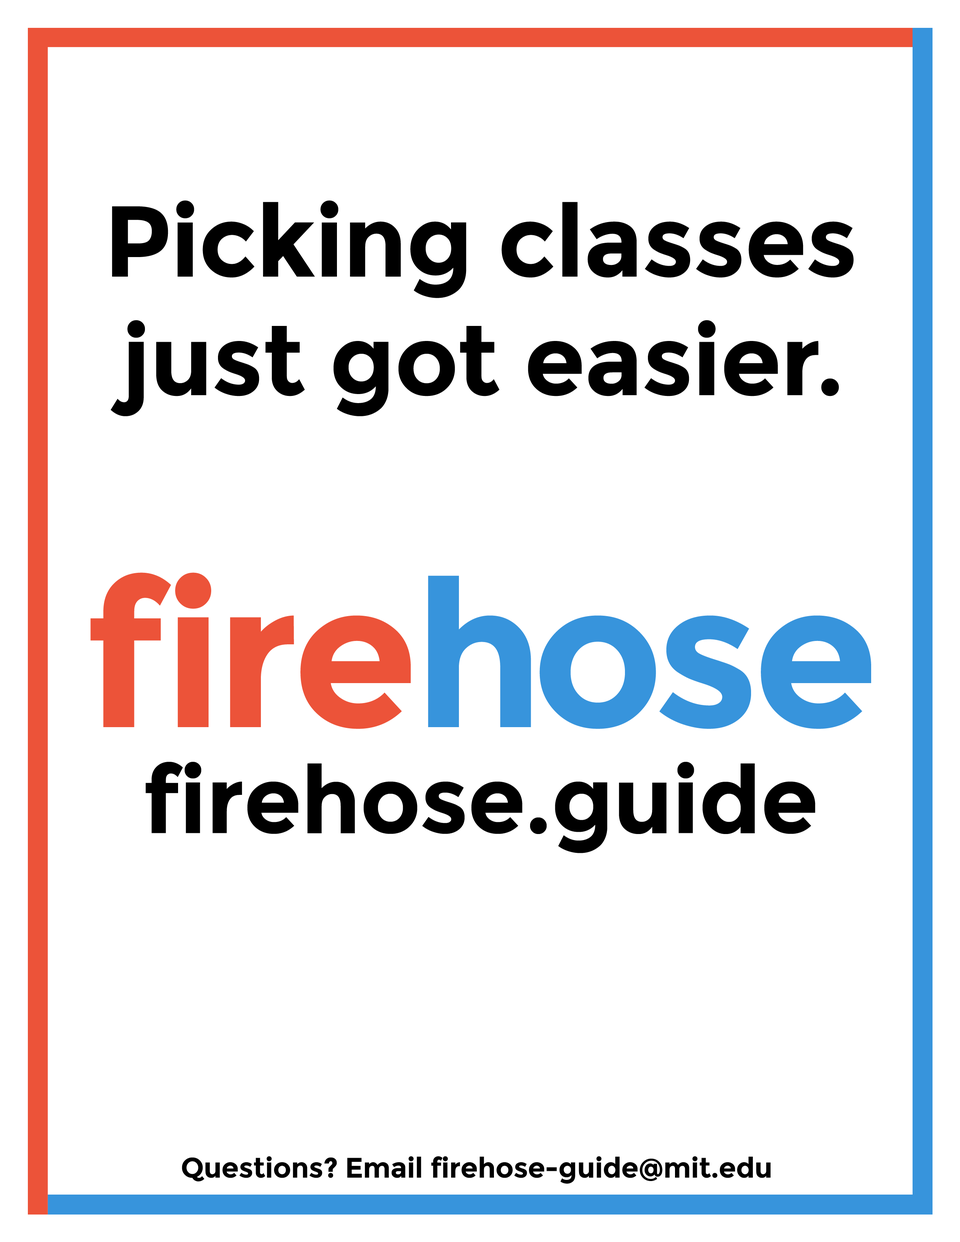
<style>
.page{position:relative;width:960px;height:1242px;background:#ffffff}
.page>*{position:absolute;margin:0}
.t1{font:98.8px "Montserrat-Bold";letter-spacing:-0.01em;color:#000000}
.t2{font:100.4px "Montserrat-Bold";letter-spacing:-0.01em;color:#000000}
.t3{font:203.9px "Montserrat-Bold";letter-spacing:-0.01em;color:#ec5339}
.t4{font:203.9px "Montserrat-Bold";letter-spacing:-0.01em;color:#3794dc}
.t5{font:94.1px "Montserrat-Bold";letter-spacing:-0.01em;color:#000000}
.t6{font:28.2px "Montserrat-Bold";letter-spacing:-0.01em;color:#000000}
</style>
<div class="page">
<p class="t1" style="left:111px;top:200px;width:743px;height:216px;text-align:center"><span class="t2">Picking classes<br></span>just got easier.</p>
<p class="t3" style="left:90px;top:573px;width:781px;height:156px">fire<span class="t4">hose</span></p>
<p class="t5" style="left:146px;top:762px;width:669px;height:91px">firehose.guide</p>
<p class="t6" style="left:182px;top:1156px;width:589px;height:28px">Questions? Email firehose-guide@mit.edu</p>
</div>
